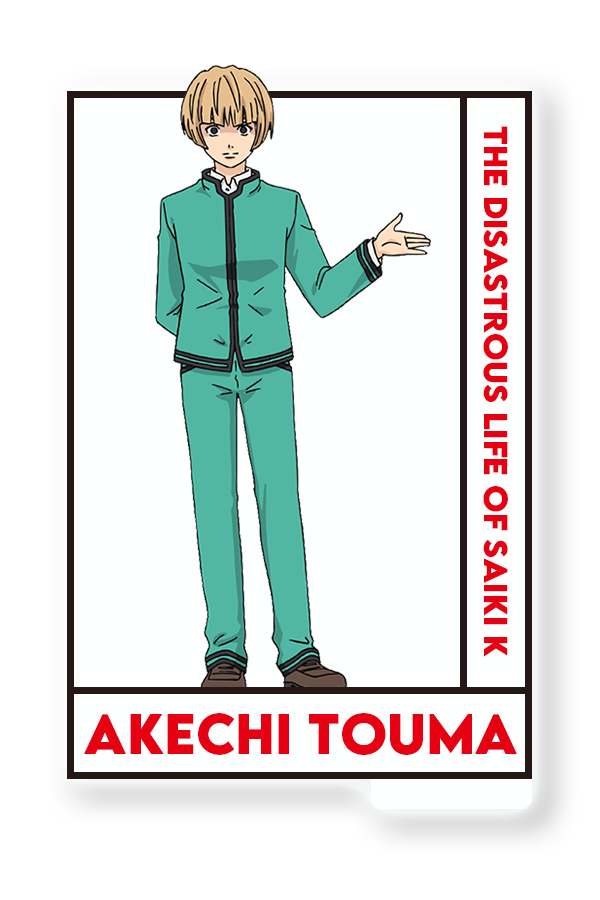
<style>
.page{position:relative;width:600px;height:900px;background:#feffff}
.page>*{position:absolute;margin:0}
.t1{font:29.6px "LEMONMILK-Bold";color:#e70012}
.t2{font:50.5px "LEMONMILK-Bold";color:#e70012}
</style>
<div class="page">
<p class="t1" style="left:483px;top:126px;width:25px;height:531px;rotate:90deg">THE disastrous Life of saiki K</p>
<p class="t2" style="left:84px;top:713px;width:433px;height:42px">Akechi Touma</p>
</div>
